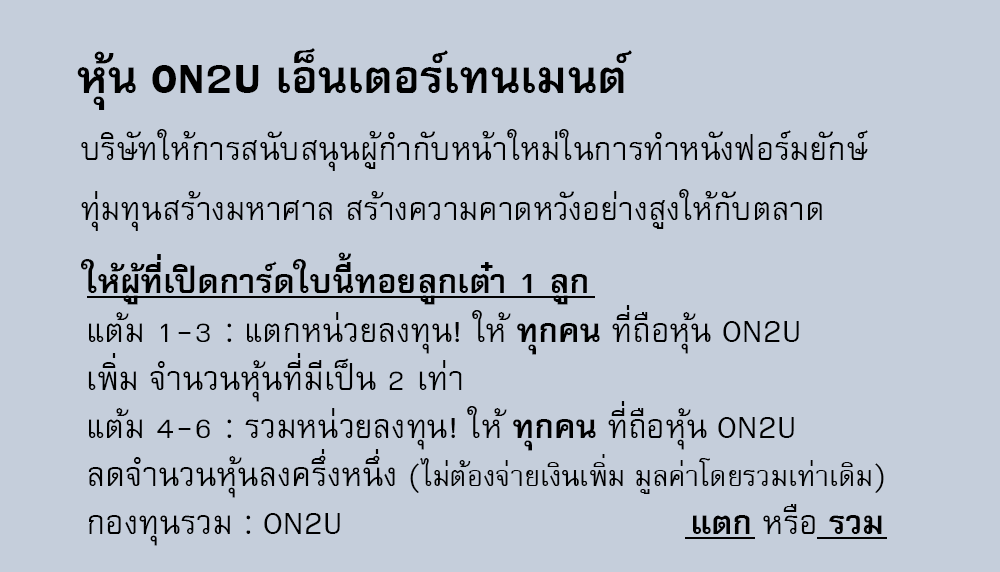
<style>
.page{position:relative;width:1000px;height:572px;background:#c5cedb}
.page>*{position:absolute;margin:0}
.t1{font:64px "FreesiaUPCBold";color:#000000}
.t2{font:45px/60px "FreesiaUPC";color:#000000}
.t3{font:47px "FreesiaUPCBold";color:#000000}
.t4{font:46px/48px "FreesiaUPC";color:#000000}
.t5{font:46px/48px "FreesiaUPCBold";color:#000000}
.t6{font:40px/48px "FreesiaUPC";color:#000000}
</style>
<div class="page">
<p class="t1" style="left:77px;top:48px;width:555px;height:62px">หุ้น ON2U เอ็นเตอร์เทนเมนต์</p>
<p class="t2" style="left:81px;top:129px;width:787px;height:102px">บริษัทให้การสนับสนุนผู้กำกับหน้าใหม่ในการทำหนังฟอร์มยักษ์<br>ทุ่มทุนสร้างมหาศาล สร้างความคาดหวังอย่างสูงให้กับตลาด</p>
<p class="t3" style="left:81px;top:252px;width:506px;height:53px">ให้ผู้ที่เปิดการ์ดใบนี้ทอยลูกเต๋า 1 ลูก</p>
<p class="t4" style="left:88px;top:305px;width:796px;height:241px">แต้ม 1-3 : แตกหน่วยลงทุน! ให้ <span class="t5">ทุกคน </span>ที่ถือหุ้น ON2U<br>เพิ่ม จำนวนหุ้นที่มีเป็น 2 เท่า<br>แต้ม 4-6 : รวมหน่วยลงทุน! ให้ <span class="t5">ทุกคน </span>ที่ถือหุ้น ON2U<br>ลดจำนวนหุ้นลงครึ่งหนึ่ง <span class="t6">(ไม่ต้องจ่ายเงินเพิ่ม มูลค่าโดยรวมเท่าเดิม)<br></span>กองทุนรวม : ON2U                                  <span class="t5">แตก</span> หรือ <span class="t5">รวม</span></p>
</div>
